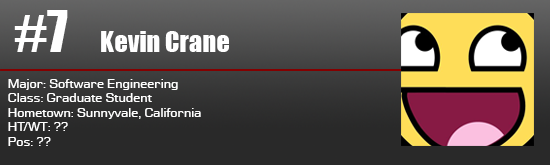
<style>
.page{position:relative;width:550px;height:165px}
.page>*{position:absolute;margin:0}
.t1{font:52.8px "Impact";color:#ffffff}
.t2{font:26.4px "Impact";color:#ffffff}
.t3{font:12px "Moire";color:#ffffff}
</style>
<div class="page">
<p class="t1" style="left:14px;top:10px;width:54px;height:42px">#7</p>
<p class="t2" style="left:101px;top:31px;width:128px;height:21px">Kevin Crane</p>
<p class="t3" style="left:8px;top:79px;width:193px;height:67px">Major: Software Engineering<br>Class: Graduate Student<br>Hometown: Sunnyvale, California<br>HT/WT: ??<br>Pos: ??</p>
</div>
